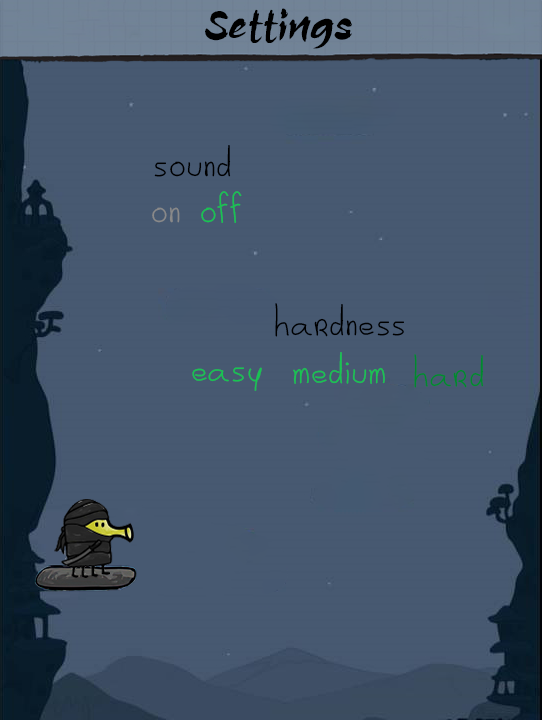
<style>
.page{position:relative;width:542px;height:720px;background:#475971}
.page>*{position:absolute;margin:0}
.t1{font:40px "aAssassinNinja";color:#000000}
.t2{font:40px "DoodleJump";color:#000000}
.t3{font:40px "DoodleJump";color:#18c452}
.t4{font:40px "DoodleJump";color:#898989}
.t5{font:40px "DoodleJump";color:#19c452}
.t6{font:40px "DoodleJump";color:#01892f}
</style>
<div class="page">
<p class="t1" style="left:205px;top:8px;width:147px;height:41px">Settings</p>
<p class="t2" style="left:154px;top:145px;width:77px;height:32px">sound</p>
<p class="t3" style="left:201px;top:191px;width:41px;height:32px">off</p>
<p class="t4" style="left:152px;top:207px;width:28px;height:16px">on</p>
<p class="t2" style="left:275px;top:303px;width:129px;height:34px">hardness</p>
<p class="t5" style="left:293px;top:352px;width:92px;height:32px">medium</p>
<p class="t6" style="left:414px;top:354px;width:70px;height:34px">hard</p>
<p class="t3" style="left:192px;top:367px;width:70px;height:24px">easy</p>
</div>
